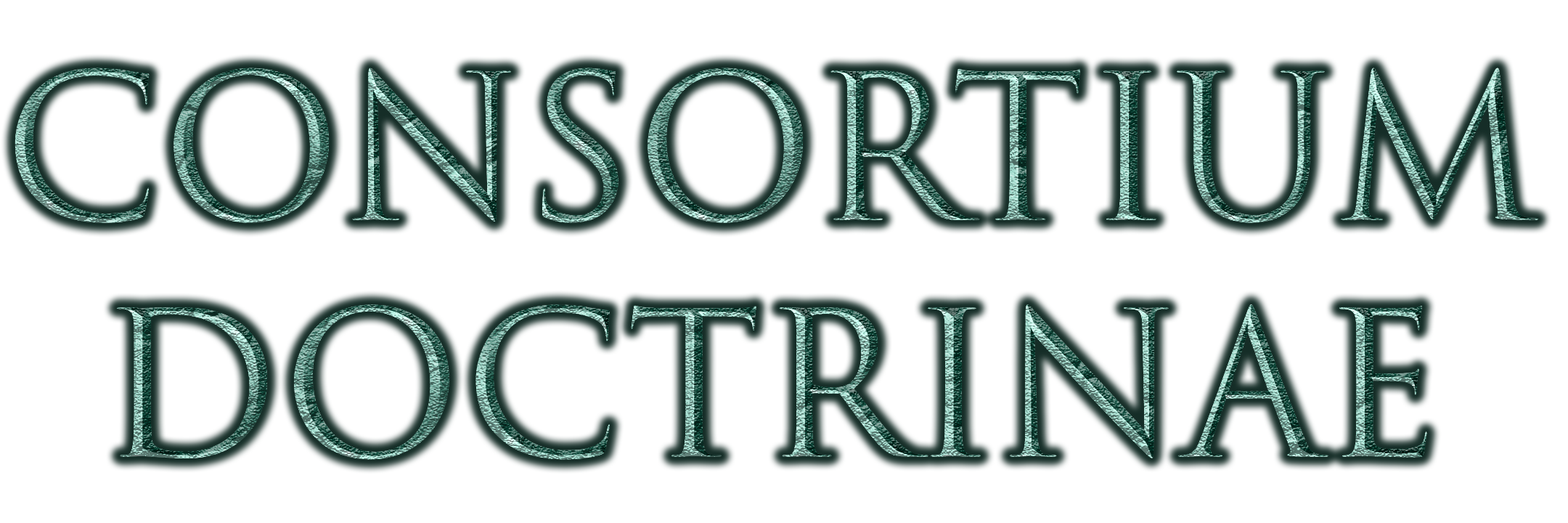
<style>
.page{position:relative;width:1568px;height:523px;background:#ffffff}
.page>*{position:absolute;margin:0}
.t1{font:197.1px "TrajanColor-Concept"}
</style>
<div class="page">
<p class="t1" style="left:15px;top:68px;width:1523px;height:392px;text-align:center">Consortium Doctrinae</p>
</div>
